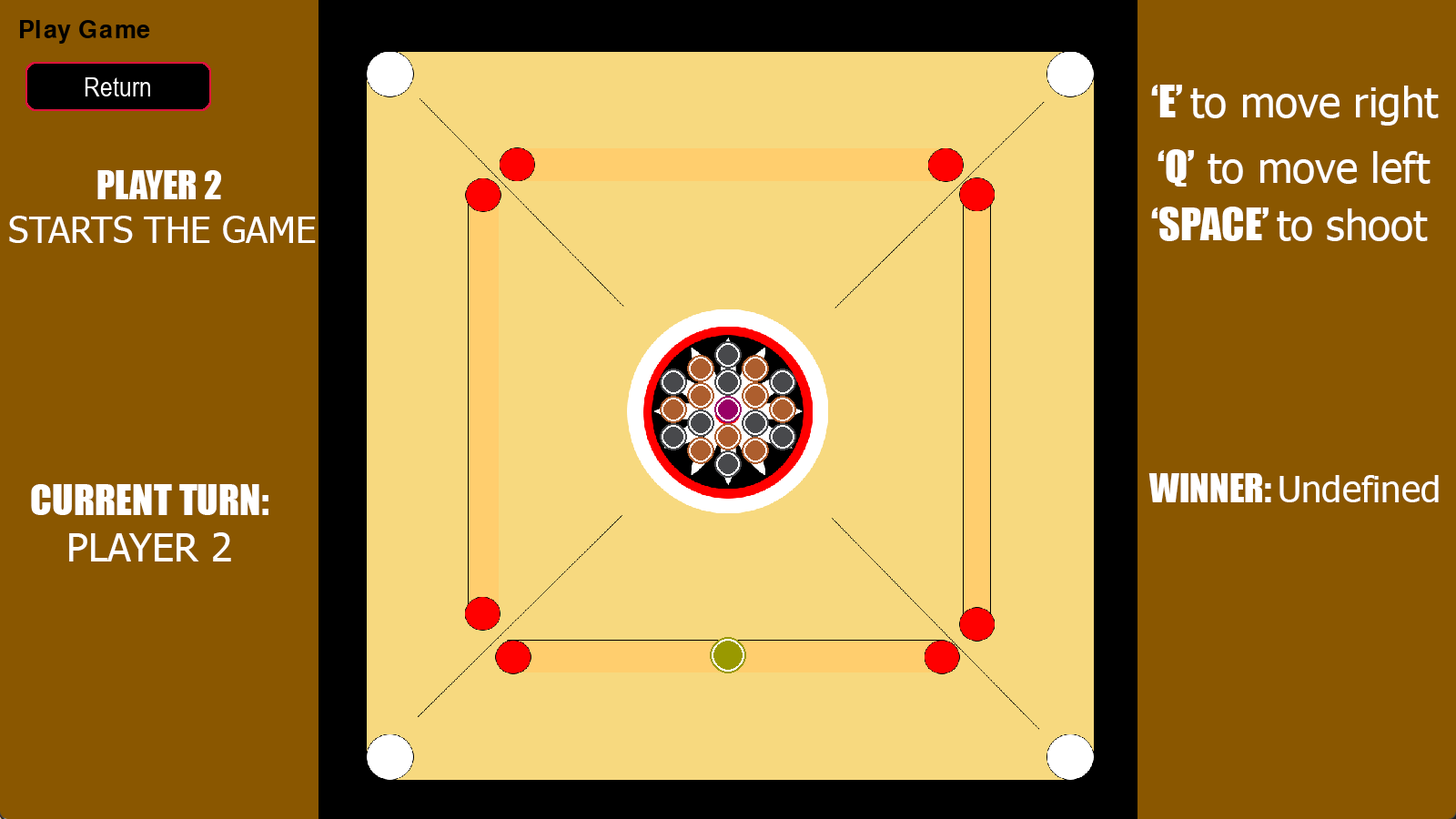
<style>
.page{position:relative;width:1456px;height:819px;background:#8a5700}
.page>*{position:absolute;margin:0}
.t1{font:41.9px "Tahoma";color:#ffffff}
.t2{font:41.9px "Impact";color:#ffffff}
.t3{font:36.4px "Tahoma";color:#ffffff}
.t4{font:36.4px "Impact";color:#ffffff}
.t5{font:39.4px "Impact";color:#ffffff}
.t6{font:39.4px "Tahoma";color:#ffffff}
</style>
<div class="page">
<p class="t1" style="left:1151px;top:85px;width:288px;height:41px"><span class="t2">‘E’ </span>to move right</p>
<p class="t1" style="left:1158px;top:149px;width:273px;height:38px"><span class="t2">‘Q’</span> to move left</p>
<p class="t3" style="left:9px;top:170px;width:307px;height:73px;text-align:center"><span class="t4">PLAYER 2 <br></span>STARTS THE GAME</p>
<p class="t1" style="left:1151px;top:207px;width:277px;height:34px"><span class="t2">‘SPACE’ </span>to shoot</p>
<p class="t3" style="left:1148px;top:473px;width:291px;height:29px"><span class="t4">WINNER: </span>Undefined</p>
<p class="t5" style="left:31px;top:484px;width:237px;height:77px;text-align:center">CURRENT TURN:<br><span class="t6">PLAYER 2</span></p>
</div>
